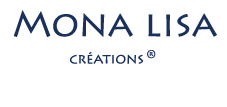
<style>
.page{position:relative;width:227px;height:107px;background:#ffffff}
.page>*{position:absolute;margin:0}
.t1{font:36px "LithosPro-Regular";color:#19315b}
.t2{font:14px "LithosPro-Regular";color:#19315b}
.t3{font:11px "LithosPro-Regular";color:#19315b}
</style>
<div class="page">
<p class="t1" style="left:13px;top:10px;width:204px;height:27px">Mona lisa</p>
<p class="t2" style="left:70px;top:51px;width:74px;height:13px">créations</p>
<p class="t3" style="left:147px;top:50px;width:9px;height:9px">®</p>
</div>
